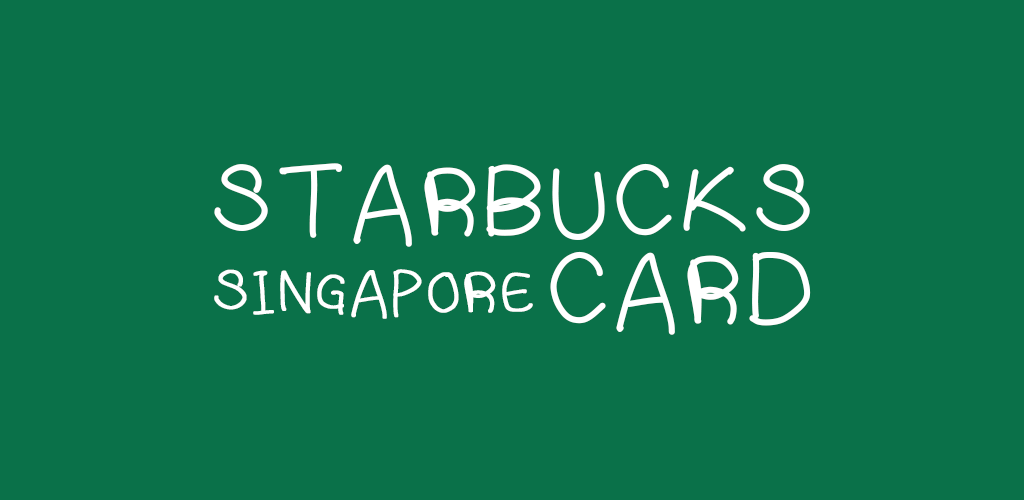
<style>
.page{position:relative;width:1024px;height:500px;background:#0a7149}
.page>*{position:absolute;margin:0}
.t1{font:109.9px "Samuel_s_handwriting_";color:#ffffff;font-weight:bold}
.t2{font:65.8px "Samuel_s_handwriting_";color:#ffffff;font-weight:bold}
</style>
<div class="page">
<p class="t1" style="left:214px;top:163px;width:596px;height:84px">STARBUCKS</p>
<p class="t1" style="left:550px;top:251px;width:261px;height:84px">CARD</p>
<p class="t2" style="left:214px;top:269px;width:319px;height:50px">SINGAPORE</p>
</div>
